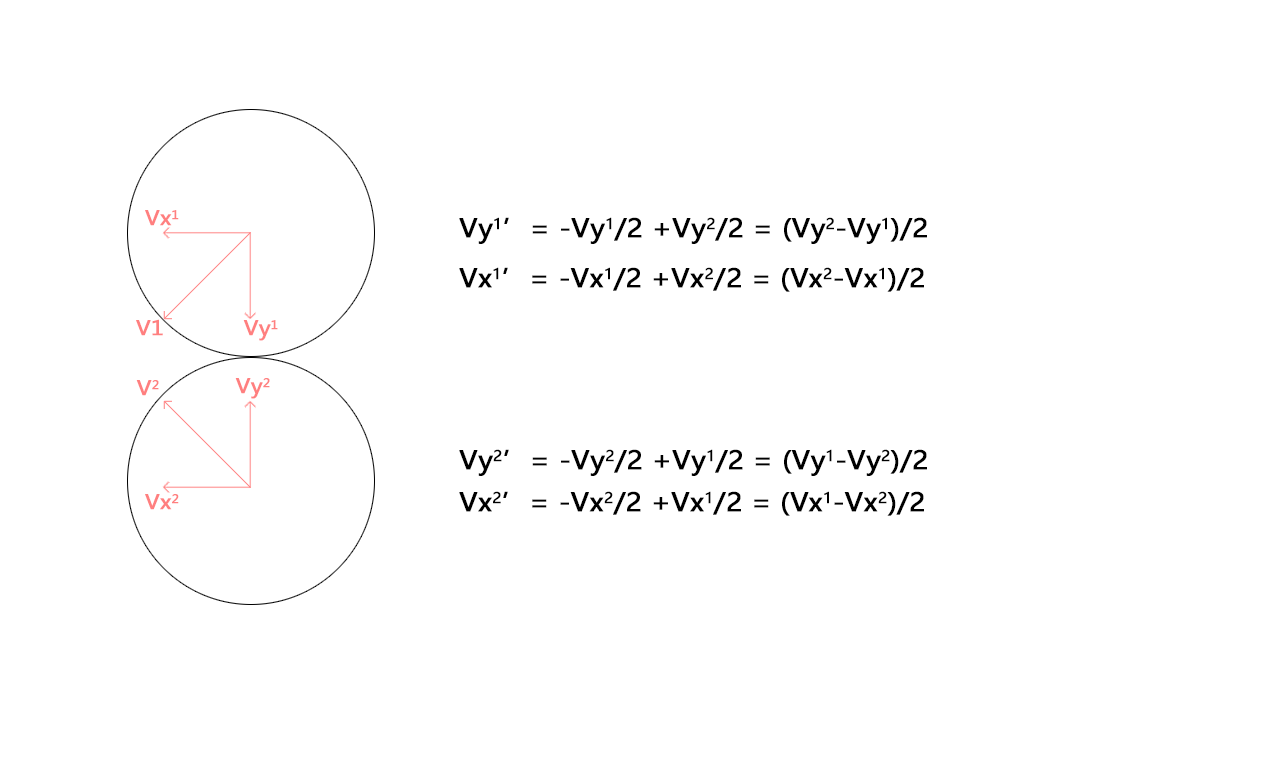
<style>
.page{position:relative;width:1280px;height:768px;background:#ffffff}
.page>*{position:absolute;margin:0}
.t1{font:20px "MicrosoftYaHei";color:#ff7f7f;font-weight:bold;scale:1.07 1}
.t2{font:25px "MicrosoftYaHei";color:#000000;font-weight:bold;scale:1.07 1}
</style>
<div class="page">
<p class="t1" style="left:145px;top:210px;width:34px;height:16px">Vx1</p>
<p class="t2" style="left:459px;top:217px;width:468px;height:27px">Vy1’= -Vy1/2 +Vy2/2 = (Vy2-Vy1)/2</p>
<p class="t2" style="left:459px;top:267px;width:465px;height:25px">Vx1’= -Vx1/2 +Vx2/2 = (Vx2-Vx1)/2</p>
<p class="t1" style="left:136px;top:319px;width:27px;height:17px">V1</p>
<p class="t1" style="left:243px;top:320px;width:35px;height:21px">Vy1</p>
<p class="t1" style="left:136px;top:380px;width:23px;height:16px">V2</p>
<p class="t1" style="left:235px;top:378px;width:35px;height:21px">Vy2</p>
<p class="t2" style="left:459px;top:449px;width:468px;height:27px">Vy2’= -Vy2/2 +Vy1/2 = (Vy1-Vy2)/2</p>
<p class="t1" style="left:145px;top:494px;width:34px;height:16px">Vx2</p>
<p class="t2" style="left:459px;top:491px;width:465px;height:25px">Vx2’= -Vx2/2 +Vx1/2 = (Vx1-Vx2)/2</p>
</div>
